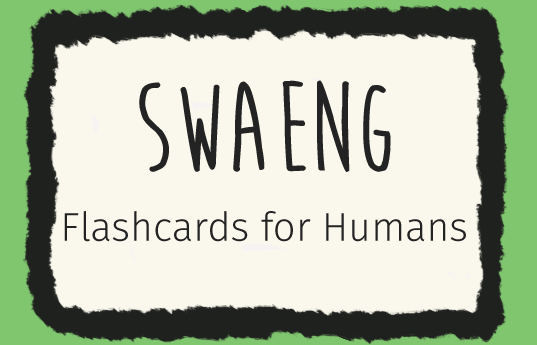
<style>
.page{position:relative;width:537px;height:345px;background:#faf8ed}
.page>*{position:absolute;margin:0}
.t1{font:131px "MoonFlowerBold";color:#232323;text-transform:uppercase}
.t2{font:40px "FiraSansOTLight";color:#232323}
</style>
<div class="page">
<p class="t1" style="left:139px;top:80px;width:252px;height:92px">SwaEng</p>
<p class="t2" style="left:64px;top:211px;width:402px;height:31px">Flashcards for Humans</p>
</div>
